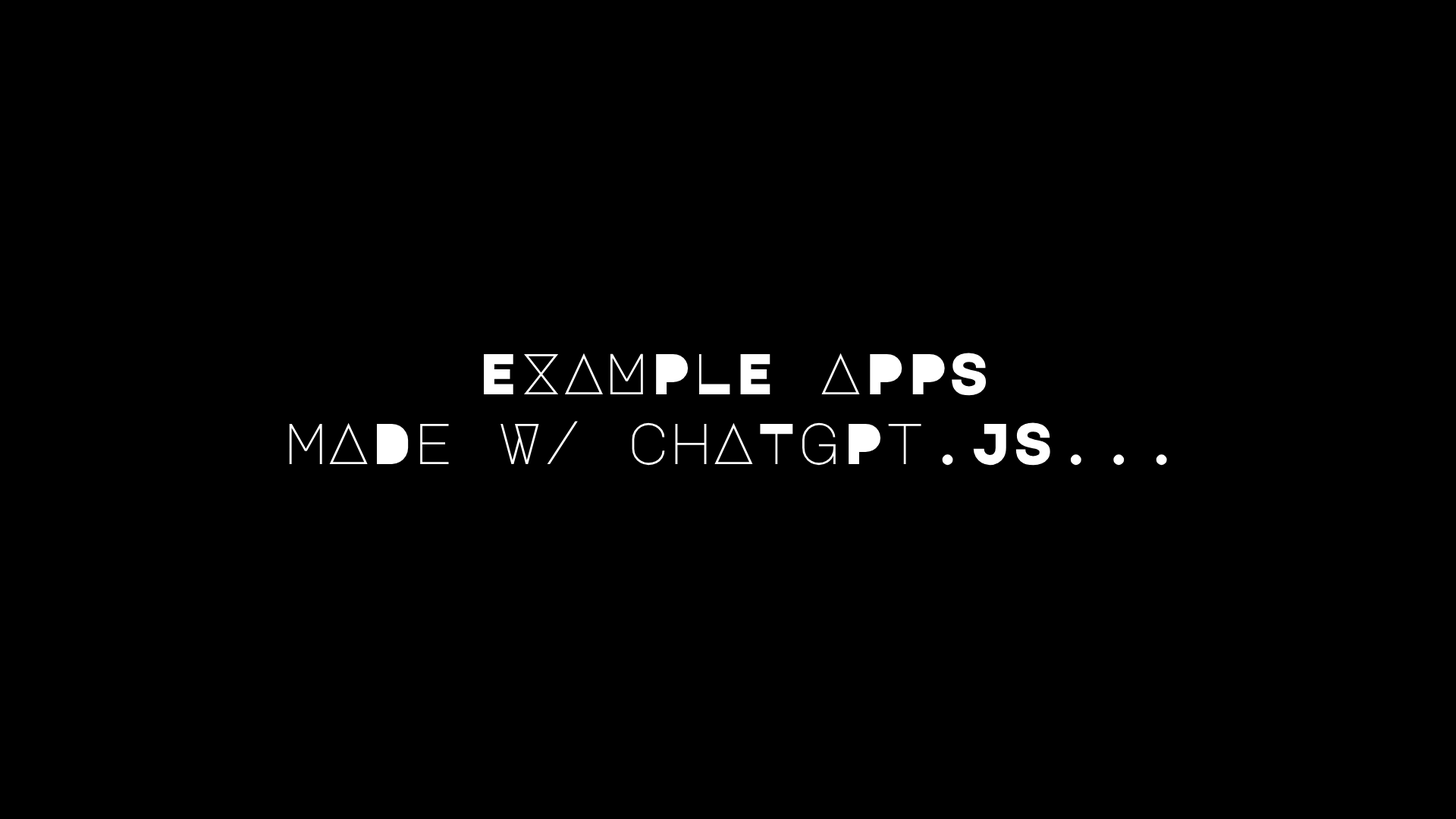
<style>
.page{position:relative;width:1456px;height:819px;background:#000000}
.page>*{position:absolute;margin:0}
.t1{font:57.8px "MajorMonoDisplay-Regular";color:#ffffff}
</style>
<div class="page">
<p class="t1" style="left:289px;top:353px;width:878px;height:113px;text-align:center">EXAMPLE APPS<br>mADe W/ chATgPt.JS...</p>
</div>
